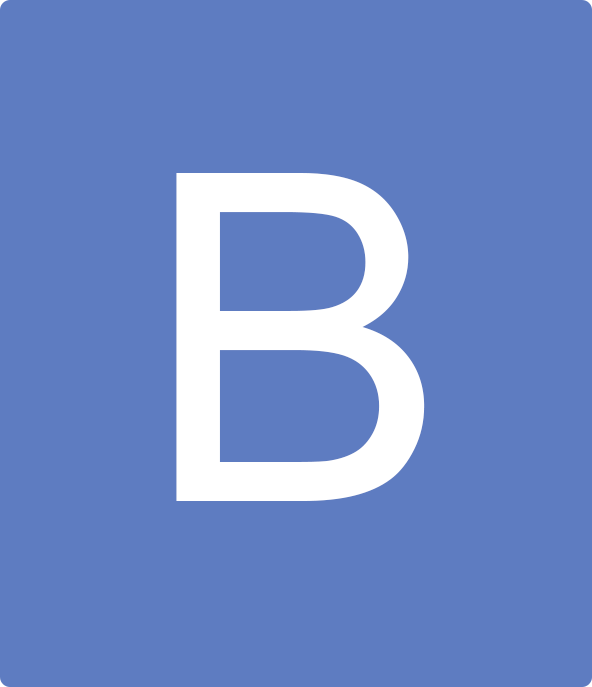
<style>
.page{position:relative;width:592px;height:687px;background:#5e7cc1}
.page>*{position:absolute;margin:0}
.t1{font:458.3px "ArialMT";color:#ffffff}
</style>
<div class="page">
<p class="t1" style="left:176px;top:173px;width:249px;height:328px">B</p>
</div>
